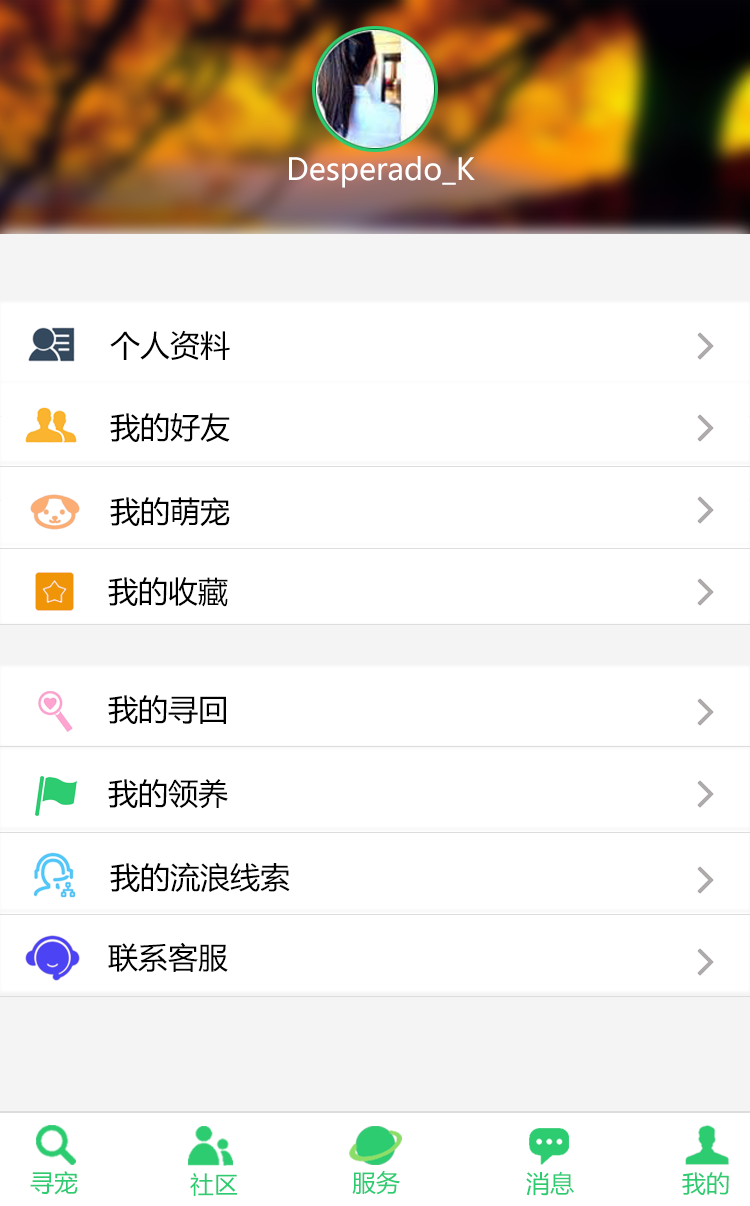
<style>
.page{position:relative;width:750px;height:1206px;background:#ffffff}
.page>*{position:absolute;margin:0}
.t1{font:30px "MicrosoftYaHei";color:#ffffff}
.t2{font:30px "MicrosoftYaHei";color:#000000}
.t3{font:24px "MicrosoftYaHei";color:#2ecc71}
.t4{font:24px "MicrosoftYaHei"}
</style>
<div class="page">
<p class="t1" style="left:289px;top:156px;width:186px;height:32px">Desperado_K</p>
<p class="t2" style="left:110px;top:330px;width:120px;height:30px">个人资料</p>
<p class="t2" style="left:110px;top:413px;width:120px;height:29px">我的好友</p>
<p class="t2" style="left:110px;top:497px;width:120px;height:30px">我的萌宠</p>
<p class="t2" style="left:108px;top:577px;width:120px;height:30px">我的收藏</p>
<p class="t2" style="left:108px;top:695px;width:118px;height:29px">我的寻回</p>
<p class="t2" style="left:108px;top:779px;width:120px;height:30px">我的领养</p>
<p class="t2" style="left:110px;top:862px;width:180px;height:30px">我的流浪线索</p>
<p class="t2" style="left:108px;top:942px;width:120px;height:30px">联系客服</p>
<p class="t3" style="left:30px;top:1171px;width:48px;height:24px">寻宠</p>
<p class="t3" style="left:190px;top:1173px;width:47px;height:23px">社区</p>
<p class="t4" style="left:352px;top:1171px;width:48px;height:25px">服务</p>
<p class="t3" style="left:352px;top:1170px;width:48px;height:25px">服务</p>
<p class="t4" style="left:525px;top:1171px;width:48px;height:25px">消息</p>
<p class="t3" style="left:526px;top:1171px;width:48px;height:25px">消息</p>
<p class="t3" style="left:682px;top:1172px;width:47px;height:23px">我的</p>
<p class="t3" style="left:682px;top:1172px;width:47px;height:23px">我的</p>
</div>
